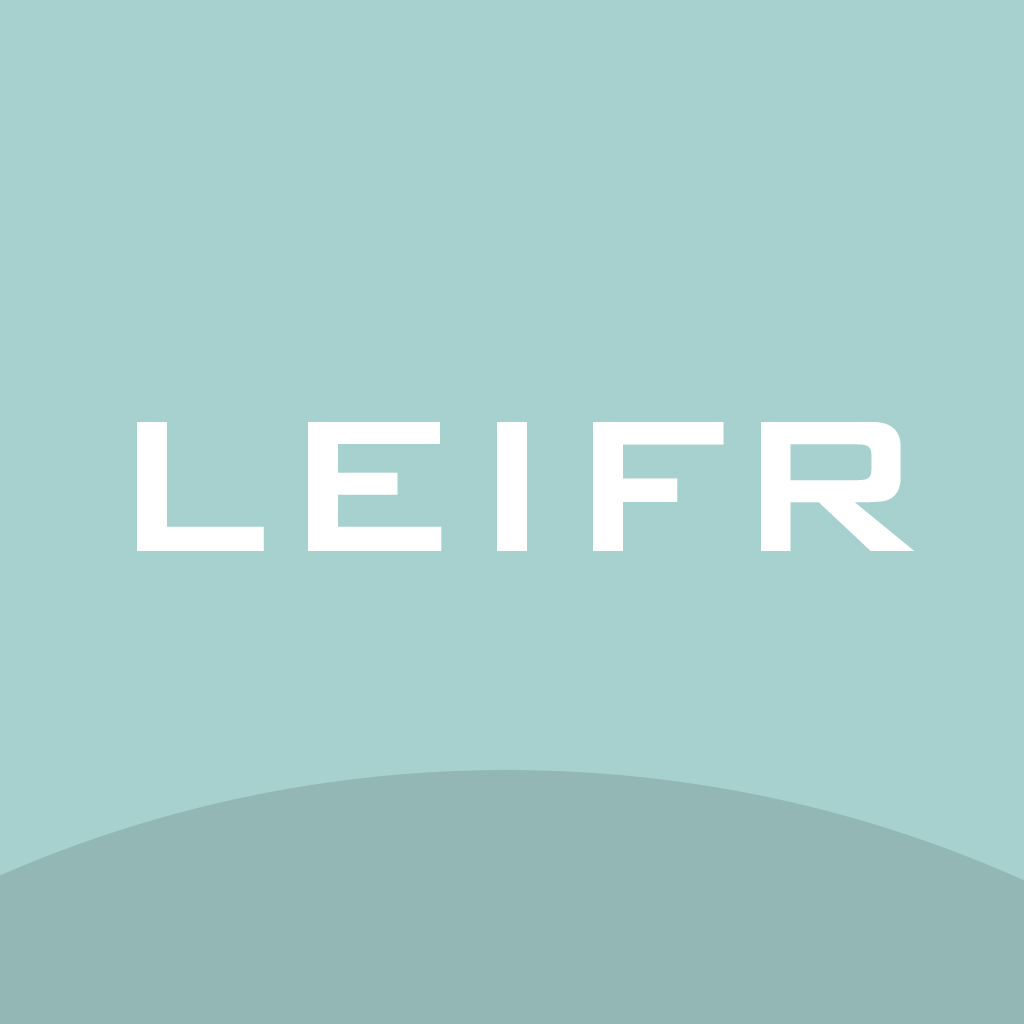
<style>
.page{position:relative;width:1024px;height:1024px;background:#a6d1ce}
.page>*{position:absolute;margin:0}
.t1{font:250px "BankGothicBold";color:#ffffff}
</style>
<div class="page">
<p class="t1" style="left:137px;top:422px;width:778px;height:129px">LEIFR</p>
</div>
